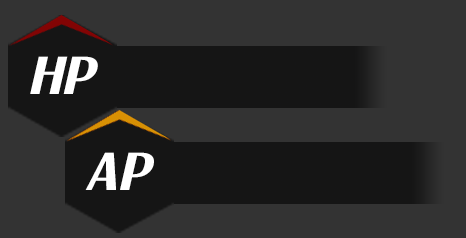
<style>
.page{position:relative;width:466px;height:238px;background:#333333}
.page>*{position:absolute;margin:0}
.t1{font:45px "KoreanPDSR-R";color:#ffffff}
</style>
<div class="page">
<p class="t1" style="left:30px;top:56px;width:68px;height:38px">HP</p>
<p class="t1" style="left:85px;top:152px;width:69px;height:38px">AP</p>
</div>
